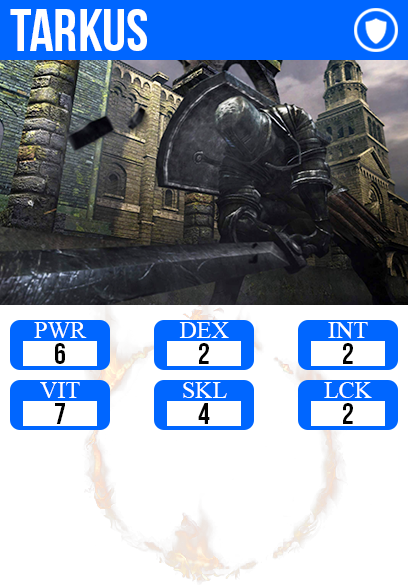
<style>
.page{position:relative;width:408px;height:585px;background:#ffffff}
.page>*{position:absolute;margin:0}
.t1{font:60px "BebasNeue";color:#ffffff}
.t2{font:24px "TimesNewRomanPSMT";color:#ffffff}
.t3{font:30px "BebasNeue";color:#000000}
</style>
<div class="page">
<p class="t1" style="left:10px;top:9px;width:137px;height:42px">tarkus</p>
<p class="t2" style="left:34px;top:322px;width:53px;height:16px">PWR</p>
<p class="t2" style="left:179px;top:322px;width:50px;height:16px">DEX</p>
<p class="t2" style="left:328px;top:322px;width:40px;height:17px">INT</p>
<p class="t3" style="left:55px;top:343px;width:10px;height:21px">6</p>
<p class="t3" style="left:199px;top:343px;width:10px;height:21px">2</p>
<p class="t3" style="left:343px;top:343px;width:10px;height:21px">2</p>
<p class="t2" style="left:40px;top:382px;width:40px;height:16px">VIT</p>
<p class="t2" style="left:183px;top:382px;width:44px;height:16px">SKL</p>
<p class="t2" style="left:324px;top:382px;width:48px;height:16px">LCK</p>
<p class="t3" style="left:55px;top:403px;width:10px;height:21px">7</p>
<p class="t3" style="left:198px;top:403px;width:12px;height:21px">4</p>
<p class="t3" style="left:343px;top:403px;width:10px;height:21px">2</p>
</div>
